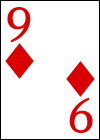
<style>
.page{position:relative;width:100px;height:140px;background:#ffffff}
.page>*{position:absolute;margin:0}
.t1{font:60px "HighTowerText-Reg";color:#da0000}
</style>
<div class="page">
<p class="t1" style="left:7px;top:7px;width:24px;height:36px">9</p>
<p class="t1" style="left:69px;top:97px;width:24px;height:36px;rotate:180deg">9</p>
</div>
